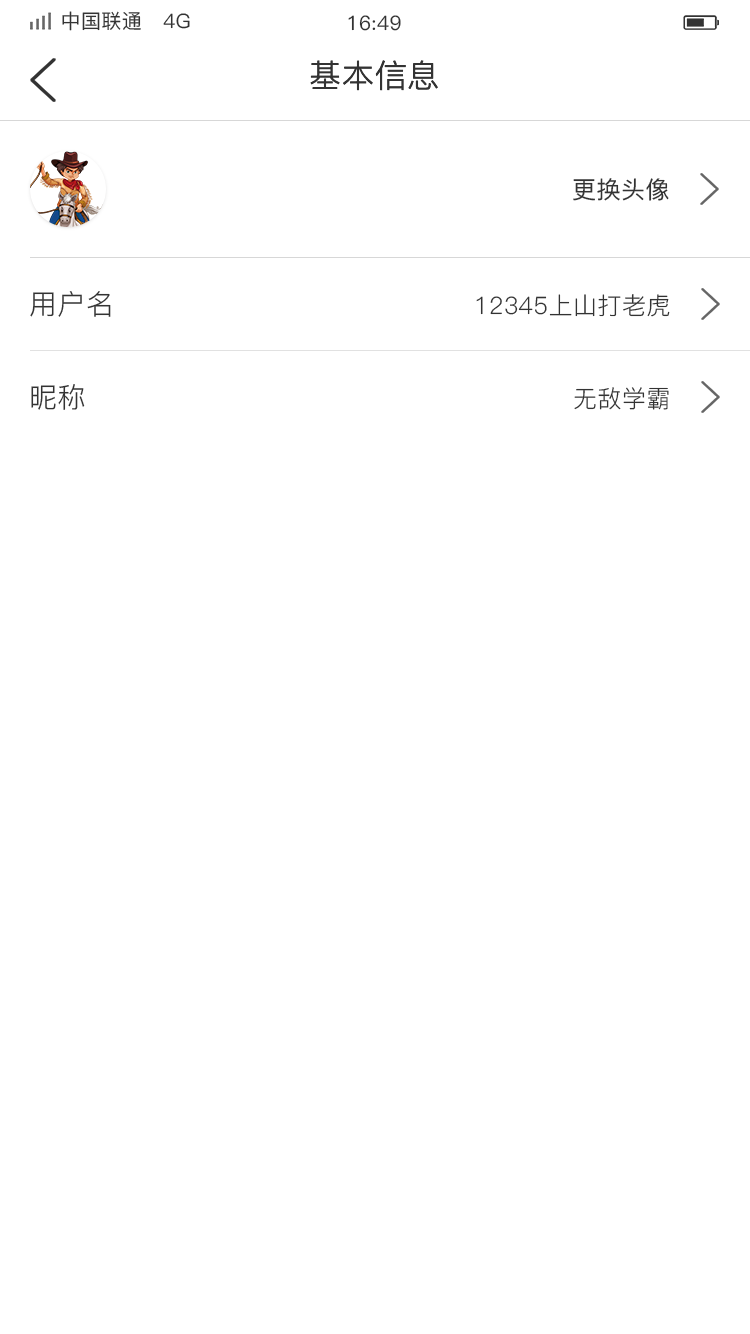
<style>
.page{position:relative;width:750px;height:1334px;background:#ffffff}
.page>*{position:absolute;margin:0}
.t1{font:20px "PingFang-SC-Medium";letter-spacing:0.02em;color:#333333}
.t2{font:32px "PingFang-SC-Regular";letter-spacing:0.02em;color:#333333}
.t3{font:24px "PingFang-SC-Medium";letter-spacing:0.02em;color:#333333}
.t4{font:28px "PingFang-SC-Regular";letter-spacing:0.02em;color:#333333}
.t5{font:24px "PingFang-SC-Regular";letter-spacing:0.02em;color:#333333}
</style>
<div class="page">
<p class="t1" style="left:62px;top:11px;width:128px;height:20px">中国联通   4G</p>
<p class="t1" style="left:348px;top:15px;width:53px;height:16px">16:49</p>
<p class="t2" style="left:310px;top:60px;width:128px;height:31px">基本信息</p>
<p class="t3" style="left:573px;top:178px;width:96px;height:23px">更换头像</p>
<p class="t4" style="left:30px;top:291px;width:81px;height:26px">用户名</p>
<p class="t5" style="left:476px;top:294px;width:194px;height:23px">12345上山打老虎</p>
<p class="t4" style="left:31px;top:384px;width:54px;height:26px">昵称</p>
<p class="t5" style="left:574px;top:387px;width:95px;height:23px">无敌学霸</p>
</div>
